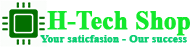
<style>
.page{position:relative;width:193px;height:47px;background:#ffffff}
.page>*{position:absolute;margin:0}
.t1{font:26.8px "TimesNewRomanPS-BoldMT";color:#13e82c;font-weight:bold;scale:0.92 1}
.t2{font:9px "TimesNewRomanPS-BoldMT";color:#0bce73;font-weight:bold;scale:1.2 1}
</style>
<div class="page">
<p class="t1" style="left:47px;top:11px;width:143px;height:25px">H-Tech Shop</p>
<p class="t2" style="left:40px;top:35px;width:147px;height:8px">Your saticfasion - Our success</p>
</div>
